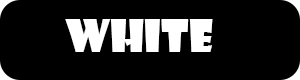
<style>
.page{position:relative;width:300px;height:80px;background:#000000}
.page>*{position:absolute;margin:0}
.t1{font:44px "ShowcardGothic-Reg";color:#ffffff}
</style>
<div class="page">
<p class="t1" style="left:65px;top:19px;width:148px;height:33px">white</p>
</div>
